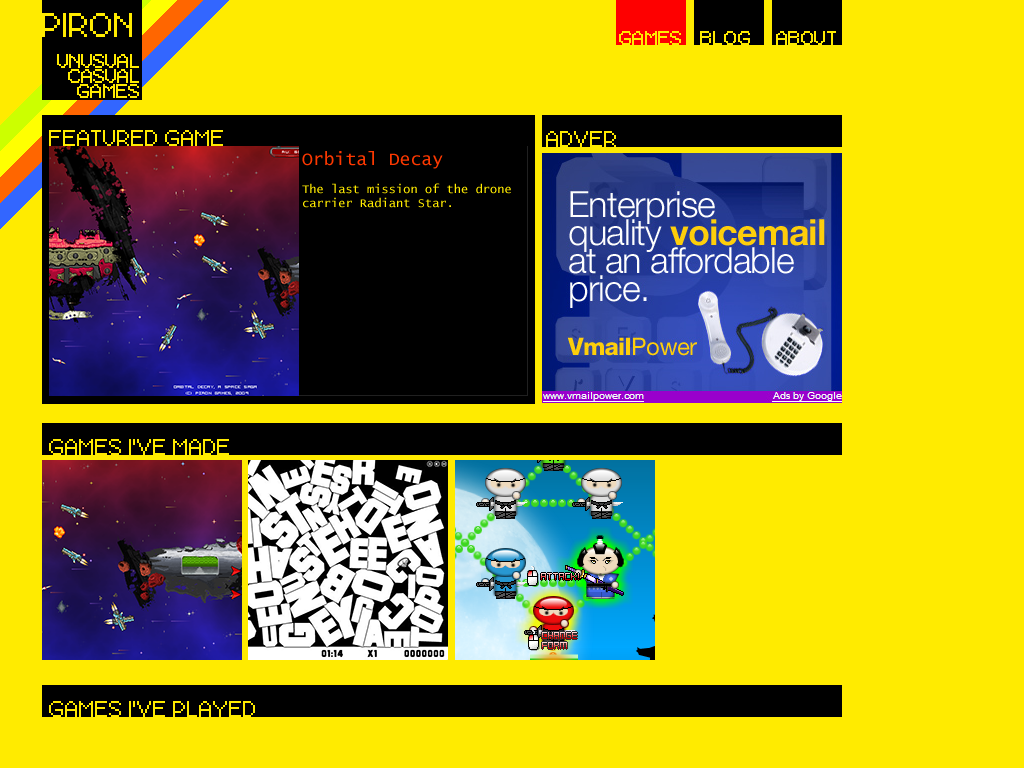
<style>
.page{position:relative;width:1024px;height:768px;background:#ffeb00}
.page>*{position:absolute;margin:0}
.t1{font:24px "PixelBerry0884Ltd.Edition";color:#ffeb00}
.t2{font:14px "PixelBerry0884Ltd.Edition";color:#ffeb00}
.t3{font:14px/15px "PixelBerry0884Ltd.Edition";color:#ffeb00}
.t4{font:16px "PixelBerry0884Ltd.Edition";color:#ffeb00}
.t5{font:12px/14px "LucidaConsole";color:#ffeb00}
.t6{font:18px/14px "LucidaConsole";color:#fc3800}
</style>
<div class="page">
<p class="t1" style="left:42px;top:13px;width:90px;height:24px">PIRON</p>
<p class="t2" style="left:619px;top:31px;width:62px;height:14px">GAMES</p>
<p class="t2" style="left:700px;top:31px;width:50px;height:14px">BLOG</p>
<p class="t2" style="left:776px;top:31px;width:60px;height:14px">ABOUT</p>
<p class="t3" style="left:57px;top:54px;width:82px;height:44px;text-align:right">UNUSUAL<br>  CASUAL<br>GAMES</p>
<p class="t4" style="left:49px;top:130px;width:174px;height:16px">FEATURED GAME</p>
<p class="t4" style="left:546px;top:131px;width:70px;height:16px">ADVER</p>
<p class="t5" style="left:302px;top:151px;width:209px;height:57px"><span class="t6">Orbital Decay<br><br></span>The last mission of the drone <br>carrier Radiant Star.</p>
<p class="t4" style="left:49px;top:439px;width:180px;height:16px">GAMES I'VE MADE</p>
<p class="t4" style="left:49px;top:701px;width:206px;height:16px">GAMES I'VE PLAYED</p>
</div>
